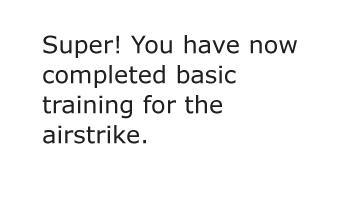
<style>
.page{position:relative;width:340px;height:222px;background:#ffffff}
.page>*{position:absolute;margin:0}
.t1{font:24px/30px "Verdana";color:#202020}
</style>
<div class="page">
<p class="t1" style="left:42px;top:35px;width:255px;height:109px">Super! You have now completed basic training for the<br>airstrike.</p>
</div>
